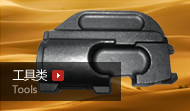
<style>
.page{position:relative;width:190px;height:111px}
.page>*{position:absolute;margin:0}
.t1{font:12px "MicrosoftYaHei";letter-spacing:-0.04em;color:#ffffff}
.t2{font:10px "MicrosoftYaHei";letter-spacing:-0.04em;color:#998e82;font-weight:bold}
</style>
<div class="page">
<p class="t1" style="left:12px;top:69px;width:36px;height:12px">工具类</p>
<p class="t2" style="left:12px;top:85px;width:25px;height:9px">Tools</p>
</div>
